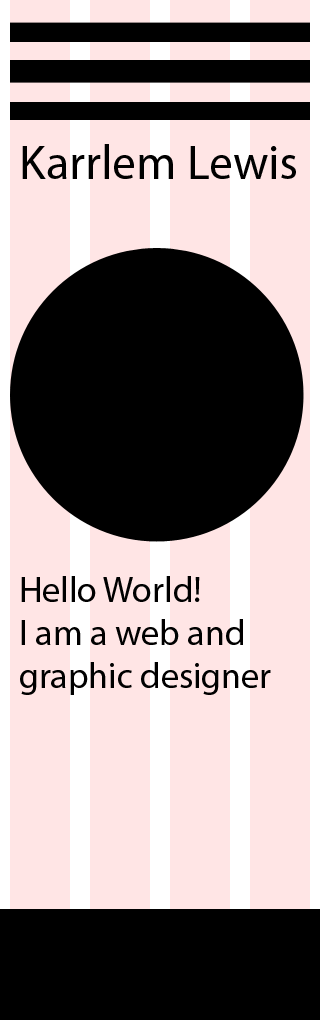
<style>
.page{position:relative;width:320px;height:1020px;background:#ffe5e5}
.page>*{position:absolute;margin:0}
.t1{font:48px "MyriadPro-Regular";color:#000000}
.t2{font:36px "MyriadPro-Regular";color:#000000}
</style>
<div class="page">
<p class="t1" style="left:22px;top:144px;width:274px;height:35px">Karrlem Lewis</p>
<p class="t2" style="left:20px;top:576px;width:251px;height:119px">Hello World!<br>I am a web and<br>graphic designer</p>
</div>
